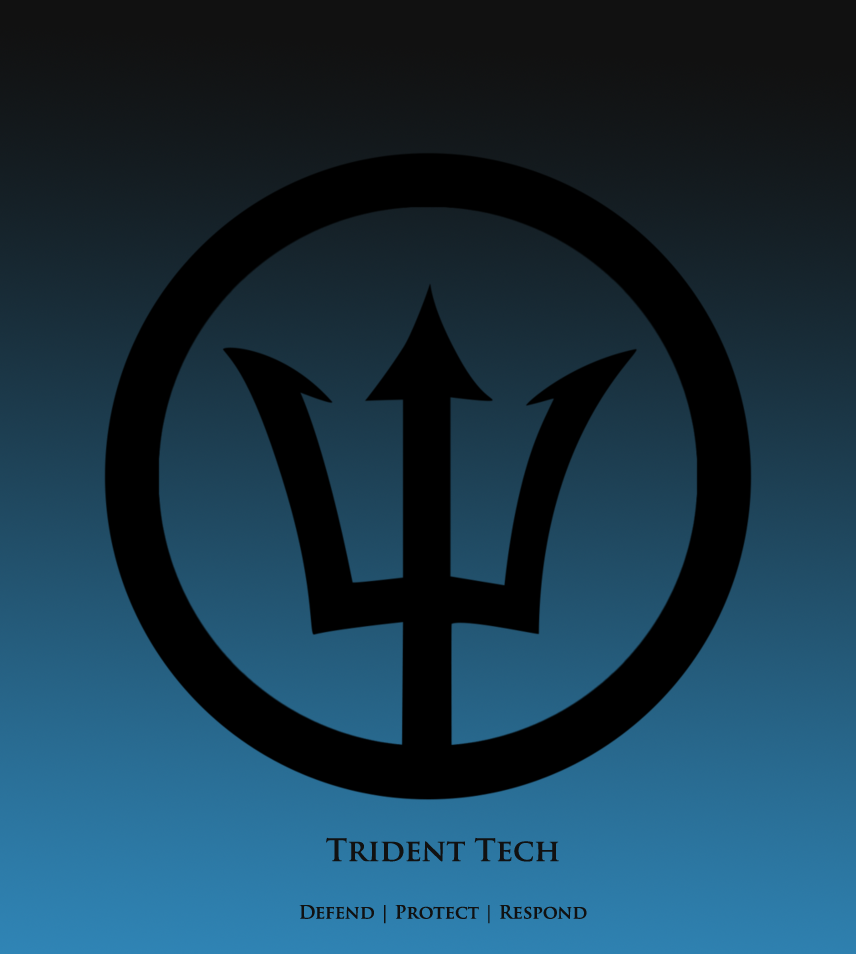
<style>
.page{position:relative;width:856px;height:954px}
.page>*{position:absolute;margin:0}
.t1{font:18px "TrajanPro-Bold";color:#111111}
.t2{font:30px "TrajanPro-Bold";color:#111111}
</style>
<div class="page">
<p class="t1" style="left:299px;top:837px;width:288px;height:87px;text-align:center"><span class="t2">Trident Tech<br><br></span>Defend | Protect | Respond</p>
</div>
